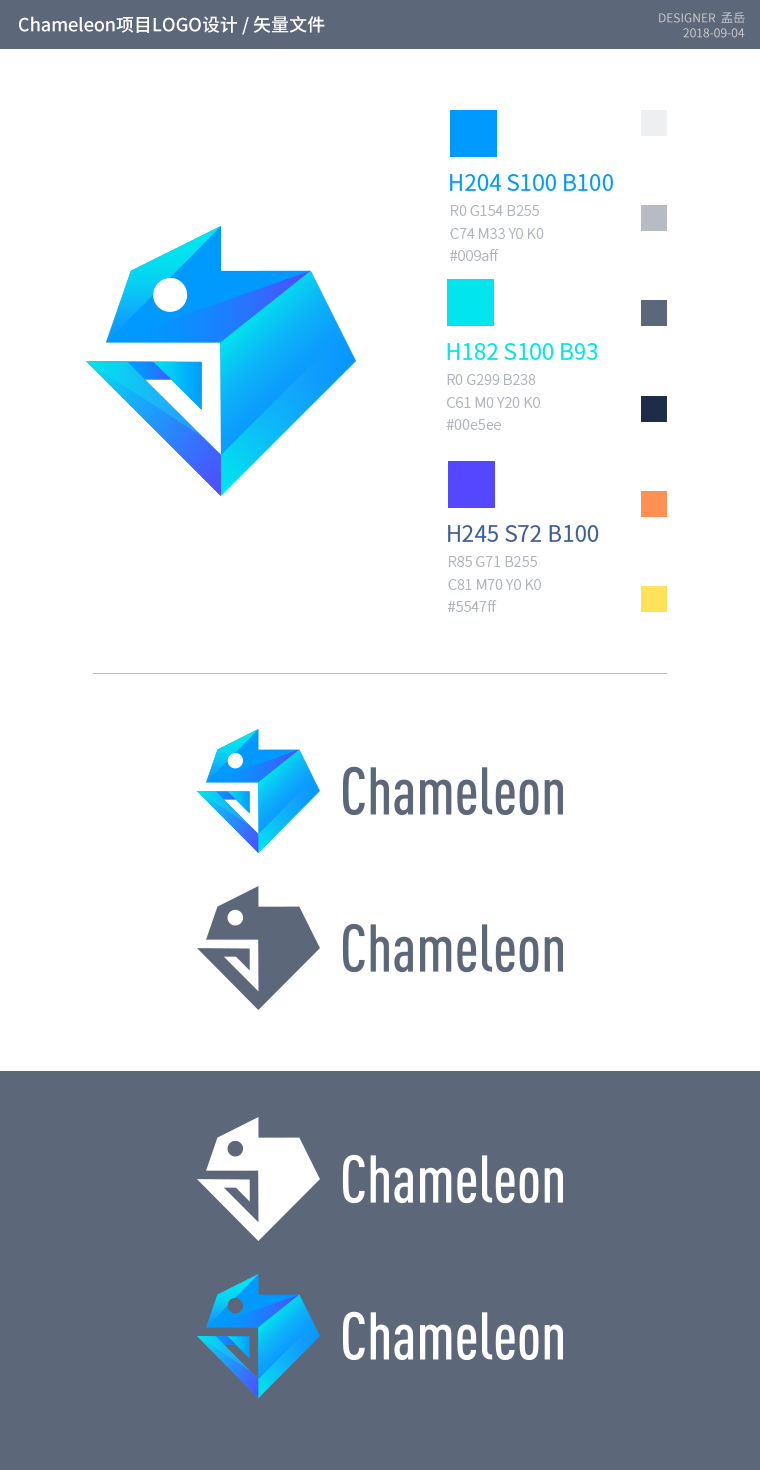
<style>
.page{position:relative;width:760px;height:1470px;background:#ffffff}
.page>*{position:absolute;margin:0}
.t1{font:18px "SourceHanSansCN-Medium";color:#ffffff}
.t2{font:12px "SourceHanSansCN-Regular";color:#c7cacc}
.t3{font:22.4px "NotoSansCJKsc-Regular";color:#009aff}
.t4{font:14.7px/22.4px "SourceHanSansCN-Light";color:#afb4bd}
.t5{font:22.4px "NotoSansCJKsc-Regular";color:#00e5ee}
.t6{font:22.4px "NotoSansCJKsc-Regular";color:#3d5e99}
</style>
<div class="page">
<p class="t1" style="left:19px;top:16px;width:306px;height:19px">Chameleon项目LOGO设计 / 矢量文件</p>
<p class="t2" style="left:659px;top:12px;width:86px;height:11px">DESIGNER  孟岳</p>
<p class="t2" style="left:683px;top:28px;width:62px;height:10px">2018-09-04</p>
<p class="t3" style="left:450px;top:174px;width:163px;height:17px">H204 S100 B100</p>
<p class="t4" style="left:450px;top:205px;width:94px;height:56px">R0 G154 B255<br>C74 M33 Y0 K0<br>#009aff</p>
<p class="t5" style="left:447px;top:343px;width:151px;height:17px">H182 S100 B93</p>
<p class="t4" style="left:446px;top:374px;width:94px;height:56px">R0 G299 B238<br>C61 M0 Y20 K0<br>#00e5ee</p>
<p class="t6" style="left:448px;top:525px;width:151px;height:17px">H245 S72 B100</p>
<p class="t4" style="left:448px;top:556px;width:93px;height:56px">R85 G71 B255<br>C81 M70 Y0 K0<br>#5547ff</p>
</div>
